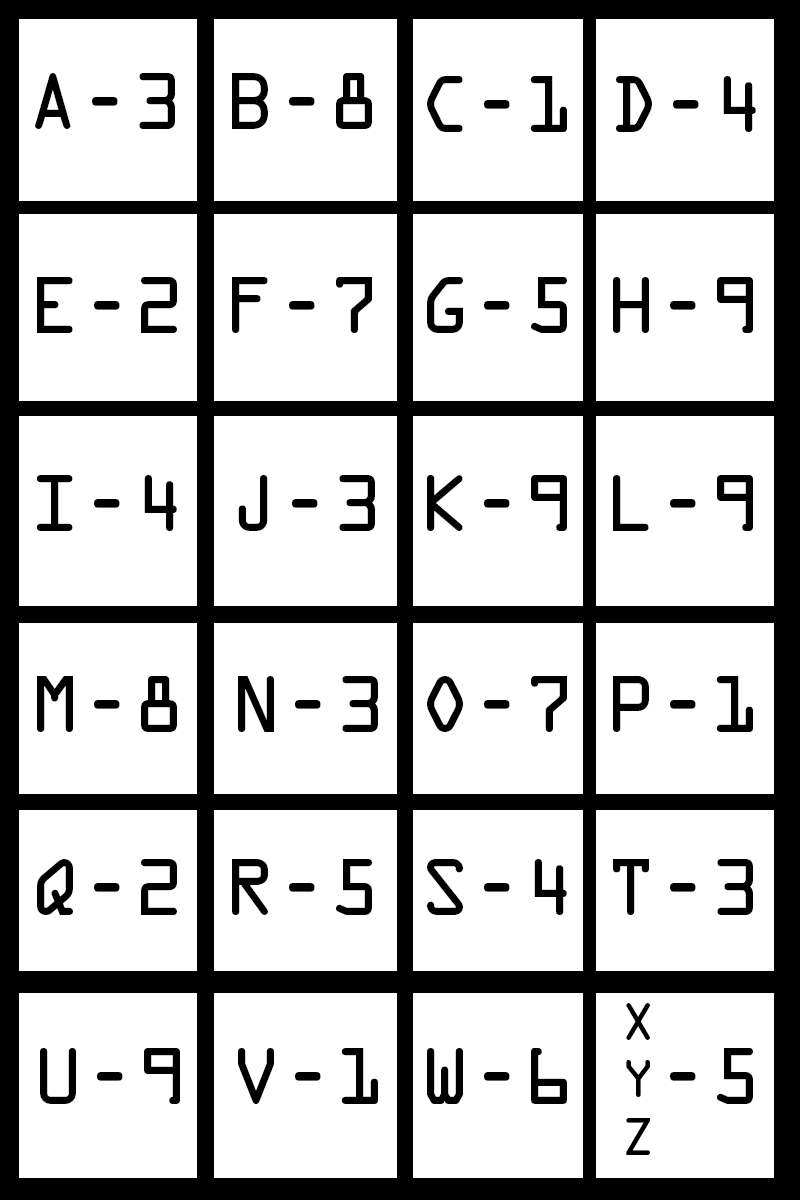
<style>
.page{position:relative;width:800px;height:1200px;background:#ffffff}
.page>*{position:absolute;margin:0}
.t1{font:72px "OCRAStd";color:#000000}
.t2{font:48px "OCRAStd";color:#000000}
</style>
<div class="page">
<p class="t1" style="left:35px;top:73px;width:140px;height:56px">A-3</p>
<p class="t1" style="left:232px;top:73px;width:140px;height:56px">B-8</p>
<p class="t1" style="left:427px;top:76px;width:140px;height:56px">C-1</p>
<p class="t1" style="left:616px;top:76px;width:140px;height:56px">D-4</p>
<p class="t1" style="left:37px;top:277px;width:140px;height:56px">E-2</p>
<p class="t1" style="left:232px;top:277px;width:140px;height:56px">F-7</p>
<p class="t1" style="left:427px;top:277px;width:140px;height:56px">G-5</p>
<p class="t1" style="left:613px;top:277px;width:140px;height:56px">H-9</p>
<p class="t1" style="left:36px;top:475px;width:141px;height:56px">I-4</p>
<p class="t1" style="left:238px;top:475px;width:137px;height:56px">J-3</p>
<p class="t1" style="left:427px;top:475px;width:140px;height:56px">K-9</p>
<p class="t1" style="left:613px;top:475px;width:140px;height:56px">L-9</p>
<p class="t1" style="left:37px;top:676px;width:140px;height:56px">M-8</p>
<p class="t1" style="left:238px;top:676px;width:140px;height:56px">N-3</p>
<p class="t1" style="left:427px;top:676px;width:140px;height:56px">O-7</p>
<p class="t1" style="left:613px;top:676px;width:140px;height:56px">P-1</p>
<p class="t1" style="left:37px;top:859px;width:140px;height:56px">Q-2</p>
<p class="t1" style="left:232px;top:859px;width:140px;height:56px">R-5</p>
<p class="t1" style="left:427px;top:859px;width:140px;height:56px">S-4</p>
<p class="t1" style="left:613px;top:859px;width:140px;height:56px">T-3</p>
<p class="t2" style="left:626px;top:1003px;width:24px;height:152px;text-align:center">X<br>Y<br>Z</p>
<p class="t1" style="left:40px;top:1048px;width:140px;height:56px">U-9</p>
<p class="t1" style="left:238px;top:1048px;width:140px;height:56px">V-1</p>
<p class="t1" style="left:427px;top:1048px;width:140px;height:56px">W-6</p>
<p class="t1" style="left:670px;top:1048px;width:83px;height:56px">-5</p>
</div>
